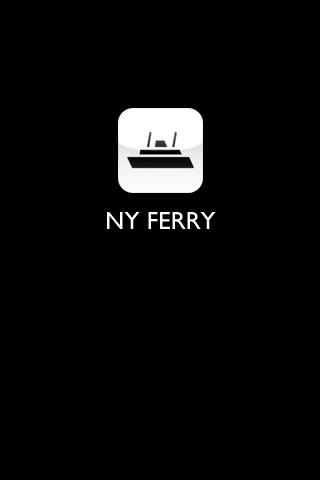
<style>
.page{position:relative;width:320px;height:480px;background:#000000}
.page>*{position:absolute;margin:0}
.t1{font:24.9px "GillSans";color:#ffffff}
</style>
<div class="page">
<p class="t1" style="left:107px;top:212px;width:109px;height:17px">NY FERRY</p>
</div>
